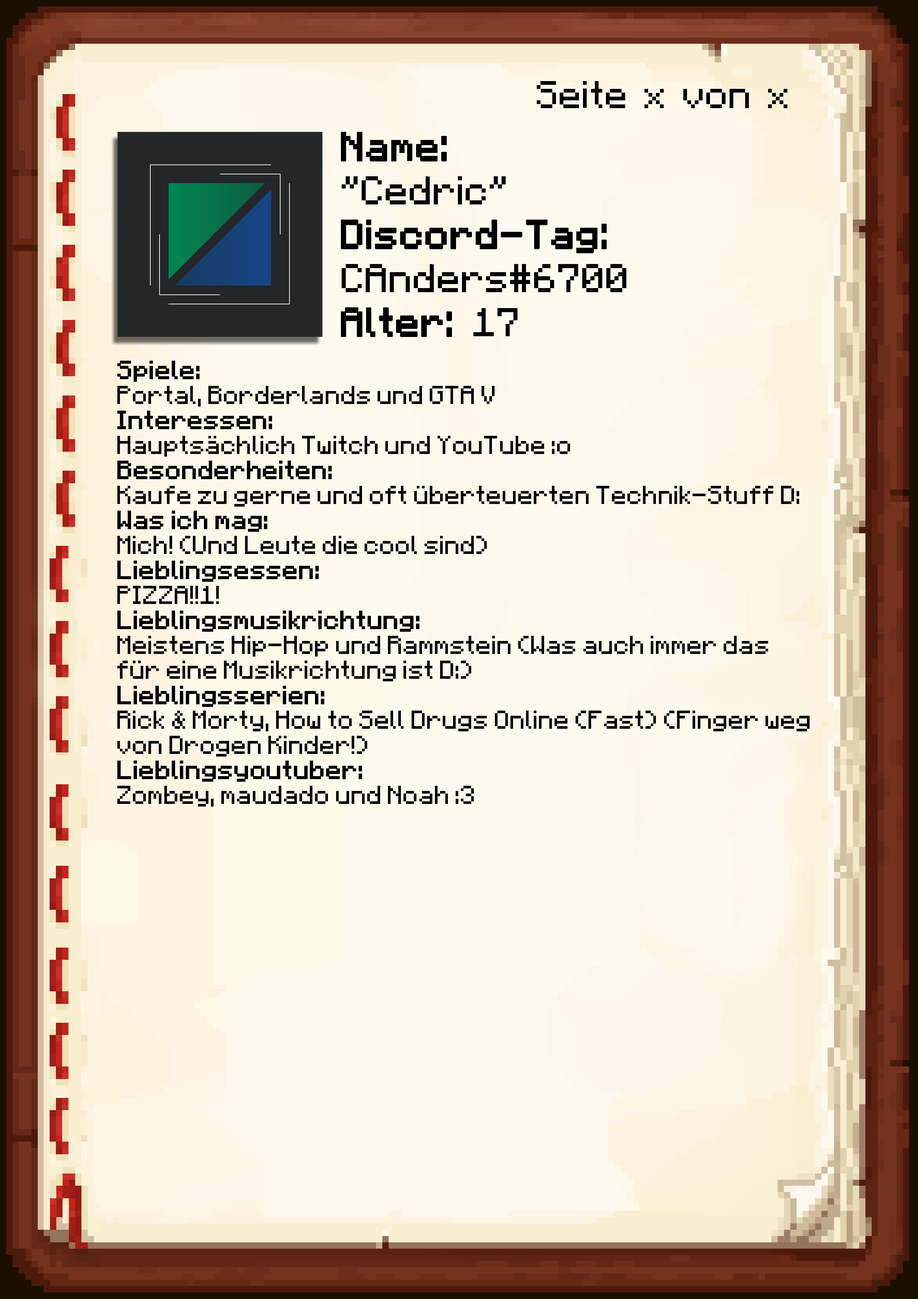
<style>
.page{position:relative;width:918px;height:1299px}
.page>*{position:absolute;margin:0}
.t1{font:38.6px "Minecraft-Regular";color:#000000}
.t2{font:40.1px/43.9px "Minecraft-Regular";color:#000000;font-weight:bold}
.t3{font:40.1px/43.9px "Minecraft-Regular";color:#000000}
.t4{font:20.8px "Minecraft";color:#000000}
.t5{font:20.8px "Minecraft";color:#000000;font-weight:bold}
</style>
<div class="page">
<p class="t1" style="left:537px;top:81px;width:250px;height:27px">Seite x von x</p>
<p class="t2" style="left:341px;top:132px;width:285px;height:205px">Name:<br><span class="t3">"Cedric"<br></span>Discord-Tag:<br><span class="t3">CAnders#6700<br></span>Alter: <span class="t3">17</span></p>
<p class="t4" style="left:117px;top:361px;width:693px;height:445px"><span class="t5">Spiele: <br></span>Portal, Borderlands und GTA V<br><span class="t5">Interessen:<br></span>Hauptsächlich Twitch und YouTube :o<br><span class="t5">Besonderheiten: <br></span>Kaufe zu gerne und oft überteuerten Technik-Stuff D:<br><span class="t5">Was ich mag:<br></span>Mich! (Und Leute die cool sind)<br><span class="t5">Lieblingsessen:<br></span>PIZZA!!1!<br><span class="t5">Lieblingsmusikrichtung:<br></span>Meistens Hip-Hop und Rammstein (Was auch immer das für eine Musikrichtung ist D:)<br><span class="t5">Lieblingsserien:<br></span>Rick &amp; Morty, How to Sell Drugs Online (Fast) (Finger weg von Drogen Kinder!)<br><span class="t5">Lieblingsyoutuber:<br></span>Zombey, maudado und Noah :3</p>
</div>
